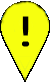
<style>
.page{position:relative;width:50px;height:82px;background:#f7ff0f}
.page>*{position:absolute;margin:0}
.t1{font:44.6px "Carlito";color:#000000;font-weight:bold;scale:1.08 1}
</style>
<div class="page">
<p class="t1" style="left:22px;top:16px;width:8px;height:31px">!</p>
</div>
